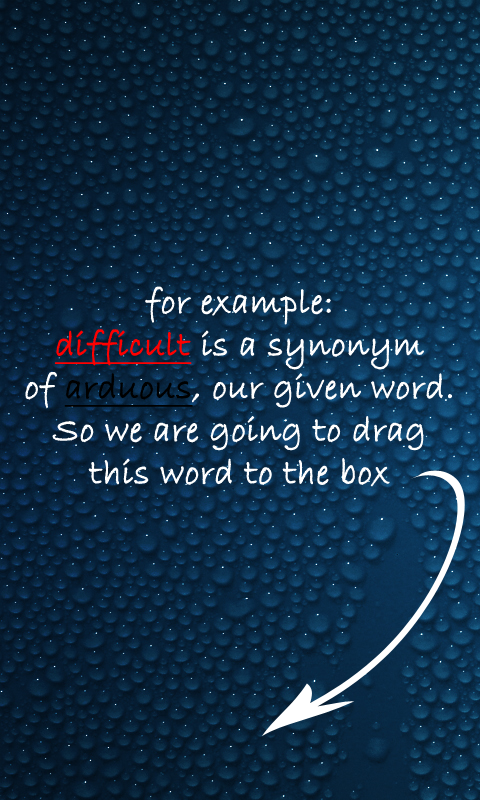
<style>
.page{position:relative;width:480px;height:800px}
.page>*{position:absolute;margin:0}
.t1{font:35.6px "BradleyHandITC";color:#ffffff;font-weight:bold}
.t2{font:35.6px "BradleyHandITC";color:#ff0000;font-weight:bold;text-decoration:underline}
.t3{font:35.6px "BradleyHandITC";color:#000000;font-weight:bold;text-decoration:underline}
</style>
<div class="page">
<p class="t1" style="left:25px;top:286px;width:428px;height:201px;text-align:center">for example:<br><span class="t2">difficult</span> is a synonym<br>of <span class="t3">arduous</span>, our given word.<br>So we are going to drag<br>this word to the box</p>
</div>
